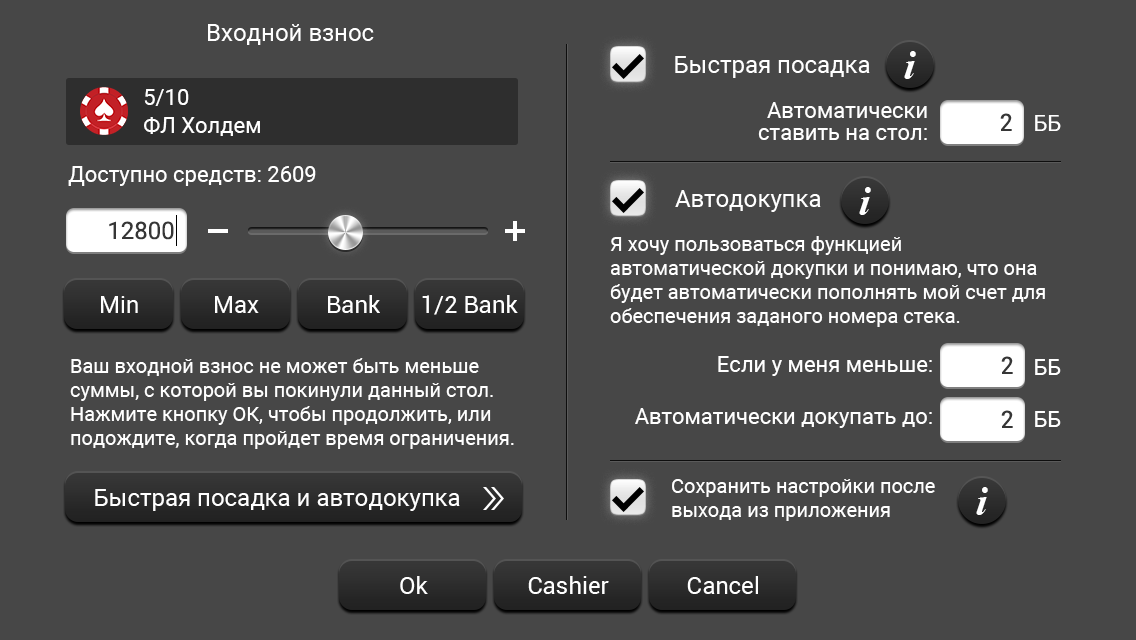
<style>
.page{position:relative;width:1136px;height:640px;background:#474747}
.page>*{position:absolute;margin:0}
.t1{font:24px "Roboto-Regular";color:#ffffff}
.t2{font:40px "TimesNewRomanPS-BoldItalicMT";color:#ffffff}
.t3{font:22px/28px "Roboto-Regular";color:#ffffff}
.t4{font:22px/22px "Roboto-Regular";color:#ffffff}
.t5{font:24px "Roboto-Regular";color:#363636}
.t6{font:22px "Roboto-Regular";color:#ffffff}
.t7{font:20px "Roboto-Regular";color:#ffffff}
.t8{font:22px/52px "Roboto-Regular";color:#ffffff}
</style>
<div class="page">
<p class="t1" style="left:208px;top:24px;width:166px;height:21px">Входной взнос</p>
<p class="t2" style="left:904px;top:51px;width:12px;height:28px">i</p>
<p class="t1" style="left:675px;top:56px;width:195px;height:22px">Быстрая посадка</p>
<p class="t3" style="left:144px;top:89px;width:116px;height:47px">5/10<br>ФЛ Холдем</p>
<p class="t4" style="left:758px;top:102px;width:169px;height:38px;text-align:right">Автоматически<br>ставить на стол:</p>
<p class="t5" style="left:1000px;top:113px;width:12px;height:18px">2</p>
<p class="t6" style="left:1035px;top:115px;width:26px;height:16px">ББ</p>
<p class="t6" style="left:68px;top:166px;width:248px;height:20px">Доступно средств: 2609</p>
<p class="t1" style="left:675px;top:190px;width:146px;height:22px">Автодокупка</p>
<p class="t2" style="left:859px;top:187px;width:12px;height:28px">i</p>
<p class="t5" style="left:109px;top:221px;width:65px;height:19px">12800</p>
<p class="t7" style="left:610px;top:236px;width:435px;height:91px">Я хочу пользоваться функцией автоматической докупки и понимаю, что она будет автоматически пополнять мой счет для обеспечения заданого номера стека.</p>
<p class="t1" style="left:101px;top:296px;width:37px;height:17px">Min</p>
<p class="t1" style="left:215px;top:296px;width:44px;height:17px">Max</p>
<p class="t1" style="left:328px;top:295px;width:52px;height:18px">Bank</p>
<p class="t1" style="left:422px;top:295px;width:96px;height:20px">1/2 Bank</p>
<p class="t7" style="left:70px;top:358px;width:444px;height:91px">Ваш входной взнос не может быть меньше суммы, с которой вы покинули данный стол. Нажмите кнопку ОК, чтобы продолжить, или подождите, когда пройдет время ограничения.</p>
<p class="t8" style="left:635px;top:356px;width:297px;height:72px;text-align:right">Если у меня меньше:<br>Автоматически докупать до:</p>
<p class="t5" style="left:1001px;top:356px;width:12px;height:18px">2</p>
<p class="t8" style="left:1035px;top:359px;width:26px;height:68px;text-align:right">ББ<br>ББ</p>
<p class="t5" style="left:1001px;top:410px;width:12px;height:18px">2</p>
<p class="t7" style="left:672px;top:479px;width:263px;height:42px">Сохранить настройки после<br>выхода из приложения</p>
<p class="t1" style="left:95px;top:489px;width:365px;height:22px">Быстрая посадка и автодокупка</p>
<p class="t2" style="left:976px;top:487px;width:12px;height:28px">i</p>
<p class="t1" style="left:400px;top:576px;width:28px;height:18px">Ok</p>
<p class="t1" style="left:528px;top:576px;width:81px;height:18px">Cashier</p>
<p class="t1" style="left:687px;top:576px;width:71px;height:18px">Cancel</p>
</div>
